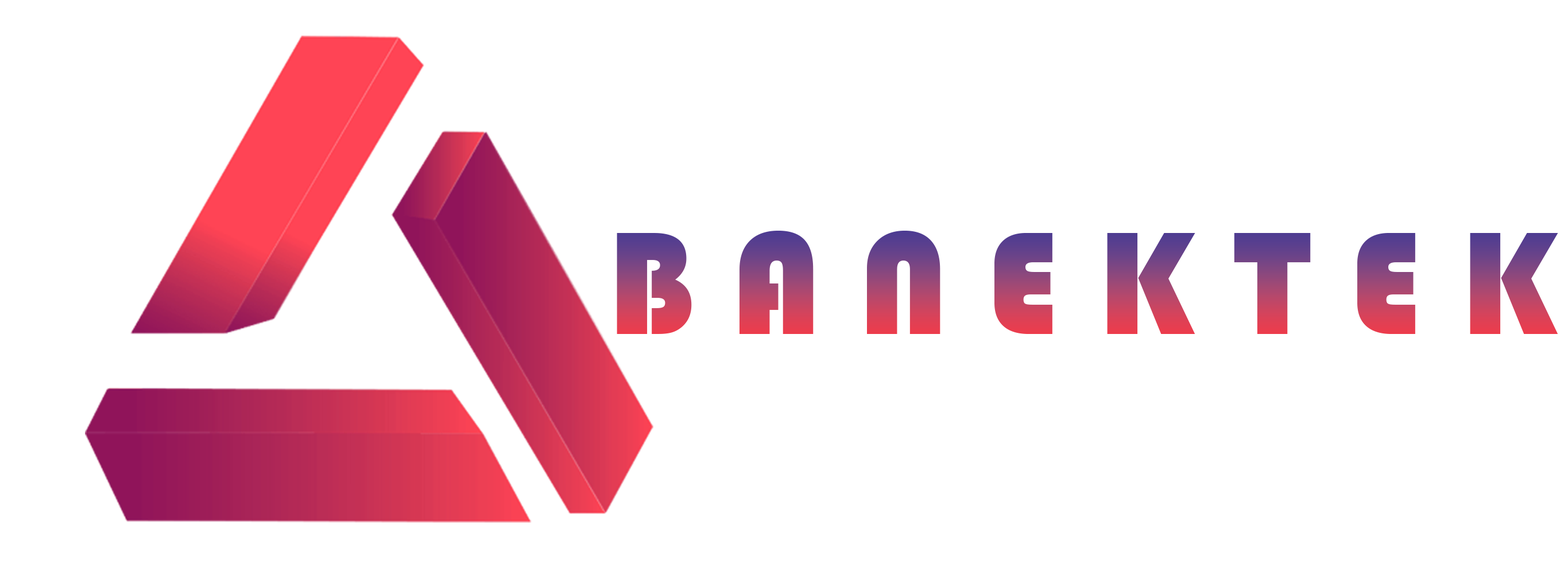
<style>
.page{position:relative;width:1568px;height:579px;background:#ffffff}
.page>*{position:absolute;margin:0}
.t1{font:151.6px "Bauhaus93"}
</style>
<div class="page">
<p class="t1" style="left:617px;top:231px;width:941px;height:103px">B A N E K T E K</p>
</div>
